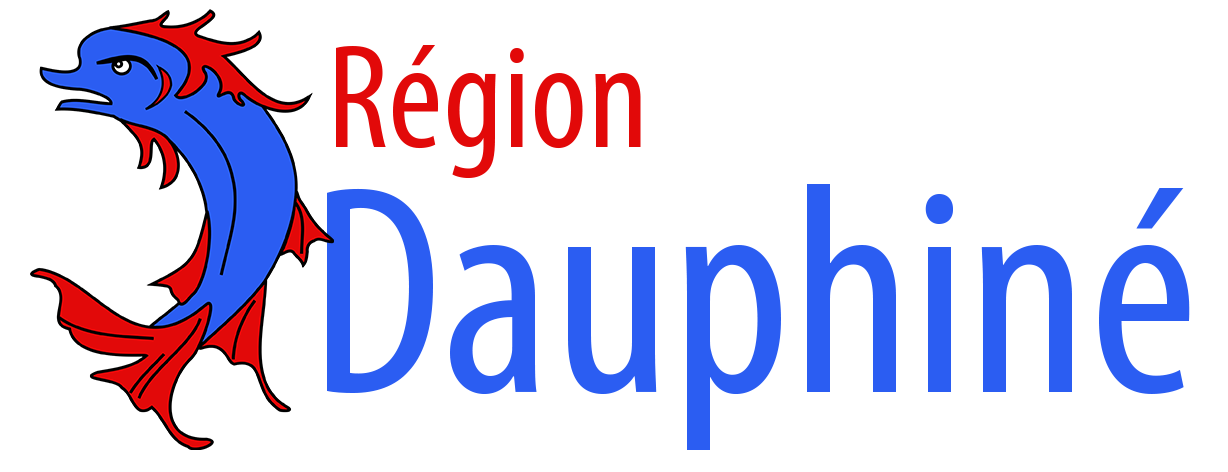
<style>
.page{position:relative;width:1228px;height:472px;background:#ffffff}
.page>*{position:absolute;margin:0}
.t1{font:150px "MyriadPro-Cond";color:#e20909}
.t2{font:300px "MyriadPro-Cond";color:#2b5df2}
</style>
<div class="page">
<p class="t1" style="left:336px;top:45px;width:305px;height:134px">Région</p>
<p class="t2" style="left:327px;top:184px;width:863px;height:266px">Dauphiné</p>
</div>
